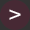
<style>
.page{position:relative;width:30px;height:30px;background:#472934}
.page>*{position:absolute;margin:0}
.t1{font:21px "ArialMT";color:#fefefe}
</style>
<div class="page">
<p class="t1" style="left:9px;top:9px;width:12px;height:11px;rotate:-90deg">v</p>
</div>
